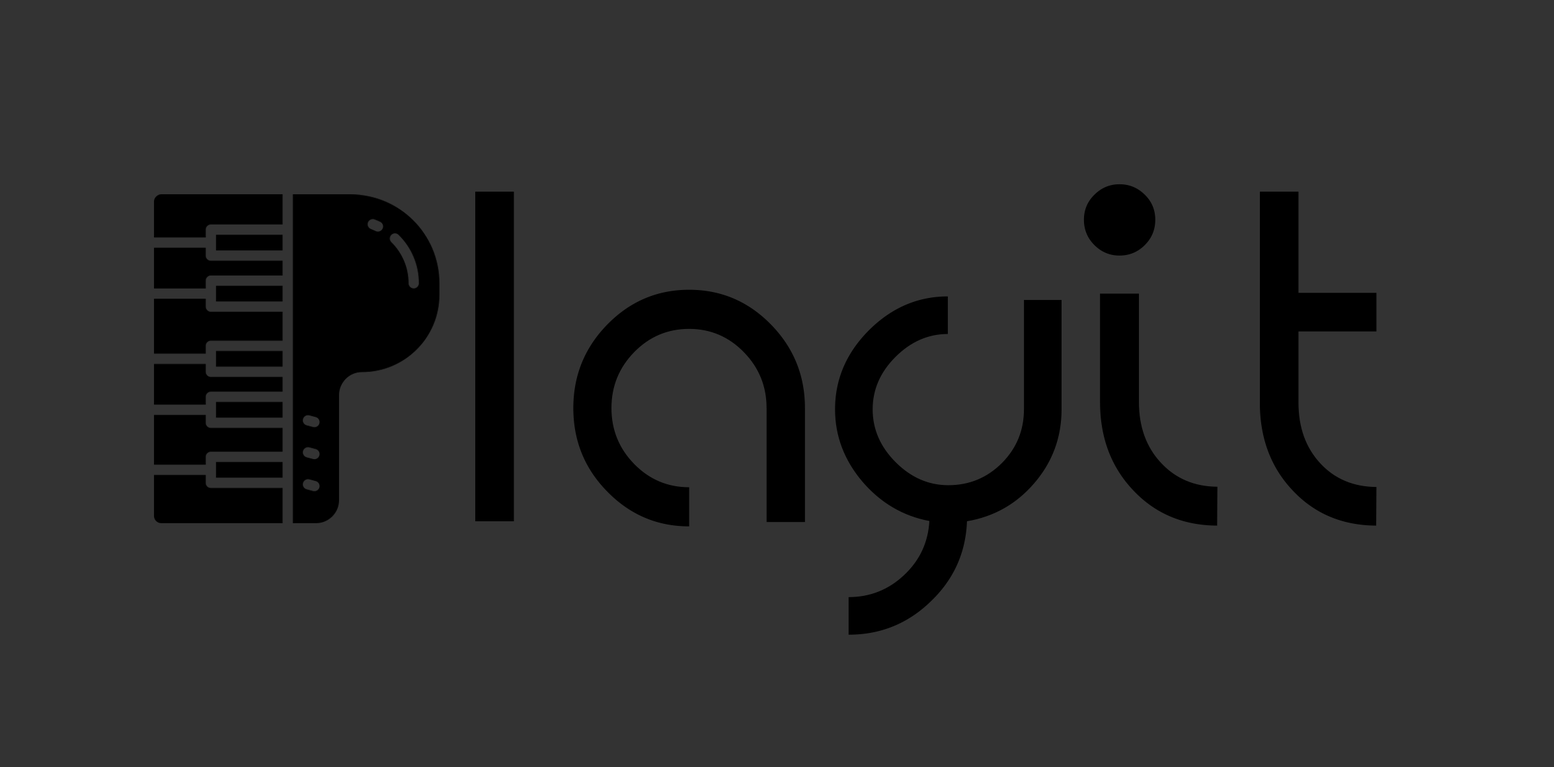
<style>
.page{position:relative;width:1554px;height:767px;background:#333333}
.page>*{position:absolute;margin:0}
.t1{font:523.8px "ArcadeFutureDisplay";letter-spacing:0.04em;color:#000000}
</style>
<div class="page">
<p class="t1" style="left:475px;top:184px;width:902px;height:451px">layit</p>
</div>
